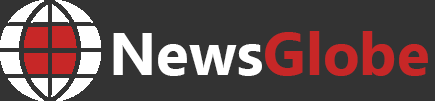
<style>
.page{position:relative;width:435px;height:101px;background:#333333}
.page>*{position:absolute;margin:0}
.t1{font:60px "Ebrima-Bold";color:#c72727}
.t2{font:60px "Ebrima-Bold";color:#ffffff}
</style>
<div class="page">
<p class="t1" style="left:113px;top:31px;width:315px;height:45px"><span class="t2">News</span>Globe</p>
</div>
